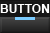
<style>
.page{position:relative;width:50px;height:33px}
.page>*{position:absolute;margin:0}
.t1{font:12px "Arial-BoldMT";color:#ffffff;text-transform:uppercase}
</style>
<div class="page">
<p class="t1" style="left:0px;top:4px;width:50px;height:9px">button</p>
</div>
